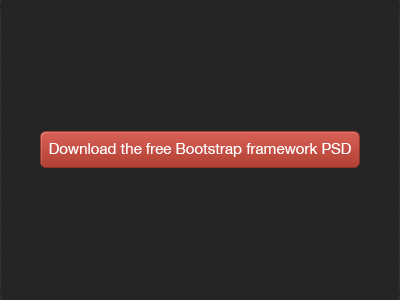
<style>
.page{position:relative;width:400px;height:300px;background:#242424}
.page>*{position:absolute;margin:0}
.t1{font:15px "HelveticaNeue";color:#ffffff}
</style>
<div class="page">
<p class="t1" style="left:49px;top:143px;width:302px;height:14px">Download the free Bootstrap framework PSD</p>
</div>
